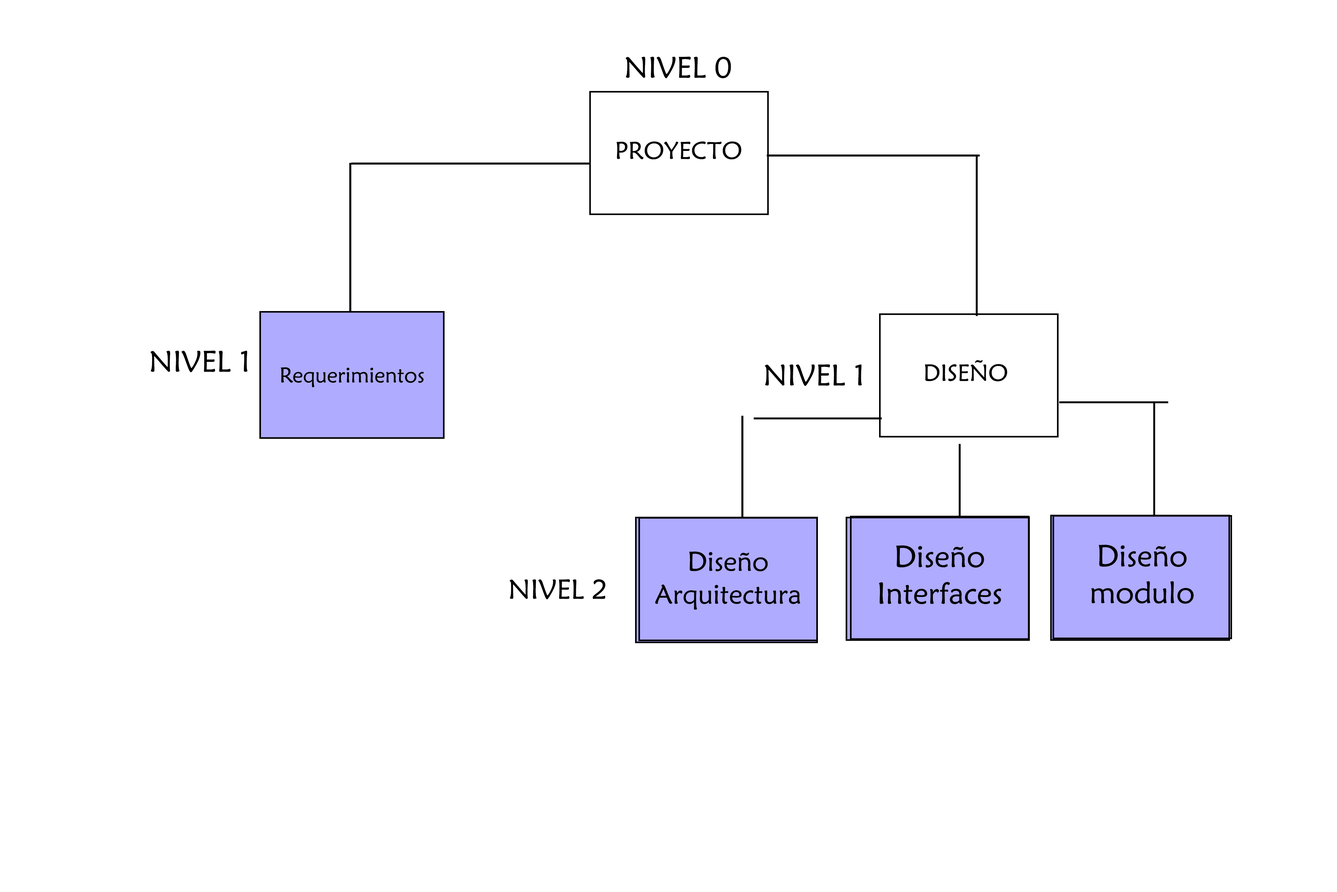
<style>
.page{position:relative;width:1337px;height:892px;background:#ffffff}
.page>*{position:absolute;margin:0}
.t1{font:29.9px "MaiandraGD-Regular";color:#000000}
.t2{font:24.4px "MaiandraGD-Regular";color:#000000}
.t3{font:23.5px "MaiandraGD-Regular";color:#000000}
.t4{font:21.5px "MaiandraGD-Regular";color:#000000}
.t5{font:30.6px "MaiandraGD-Regular";color:#000000}
.t6{font:27.4px "MaiandraGD-Regular";color:#000000}
.t7{font:27.6px "MaiandraGD-Regular";color:#000000}
</style>
<div class="page">
<p class="t1" style="left:626px;top:57px;width:105px;height:21px">NIVEL 0</p>
<p class="t2" style="left:617px;top:141px;width:125px;height:18px">PROYECTO</p>
<p class="t1" style="left:150px;top:350px;width:98px;height:22px">NIVEL 1</p>
<p class="t1" style="left:765px;top:364px;width:97px;height:22px">NIVEL 1</p>
<p class="t3" style="left:925px;top:360px;width:83px;height:21px">DISEÑO</p>
<p class="t4" style="left:281px;top:367px;width:143px;height:20px">Requerimientos</p>
<p class="t5" style="left:879px;top:545px;width:123px;height:59px;text-align:center">Diseño<br>Interfaces</p>
<p class="t5" style="left:1091px;top:544px;width:103px;height:59px;text-align:center">Diseño<br>modulo</p>
<p class="t6" style="left:655px;top:551px;width:146px;height:58px;text-align:center">Diseño<br>Arquitectura</p>
<p class="t7" style="left:510px;top:579px;width:95px;height:20px">NIVEL 2</p>
</div>
